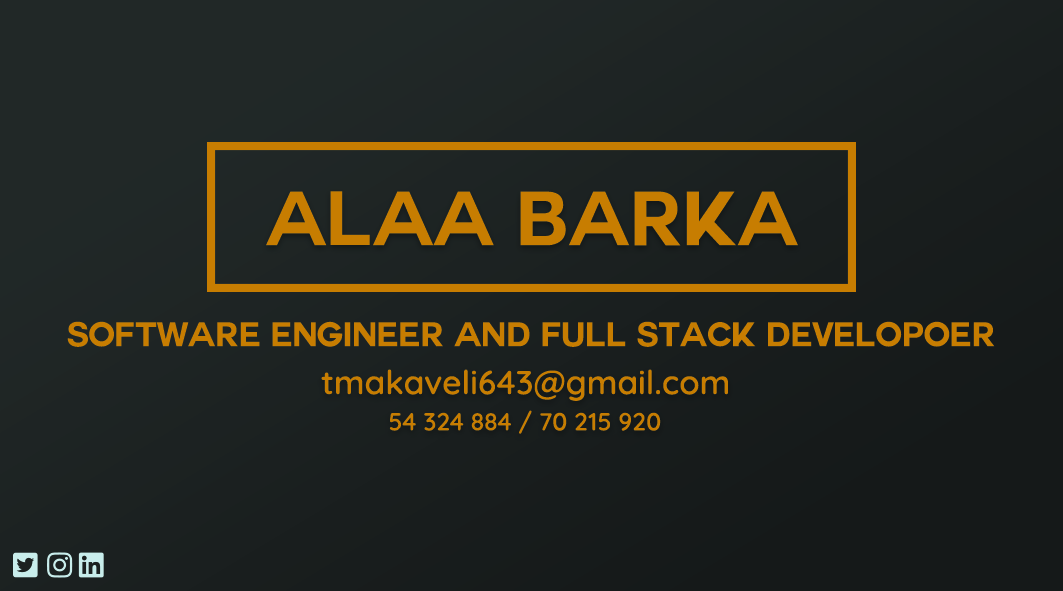
<style>
.page{position:relative;width:1063px;height:591px}
.page>*{position:absolute;margin:0}
.t1{font:75px "Couture-Bold";color:#c77d01}
.t2{font:33.3px "Couture-Bold";color:#c77d01}
.t3{font:33.3px "Quicksand-SemiBold";color:#c77d01}
.t4{font:24.7px "Quicksand-SemiBold";color:#c77d01}
</style>
<div class="page">
<p class="t1" style="left:266px;top:191px;width:532px;height:55px">Alaa barka</p>
<p class="t2" style="left:67px;top:321px;width:928px;height:26px">Software engineer and Full Stack developoer</p>
<p class="t3" style="left:321px;top:369px;width:407px;height:32px">tmakaveli643@gmail.com</p>
<p class="t4" style="left:389px;top:410px;width:272px;height:24px">54 324 884 / 70 215 920</p>
</div>
